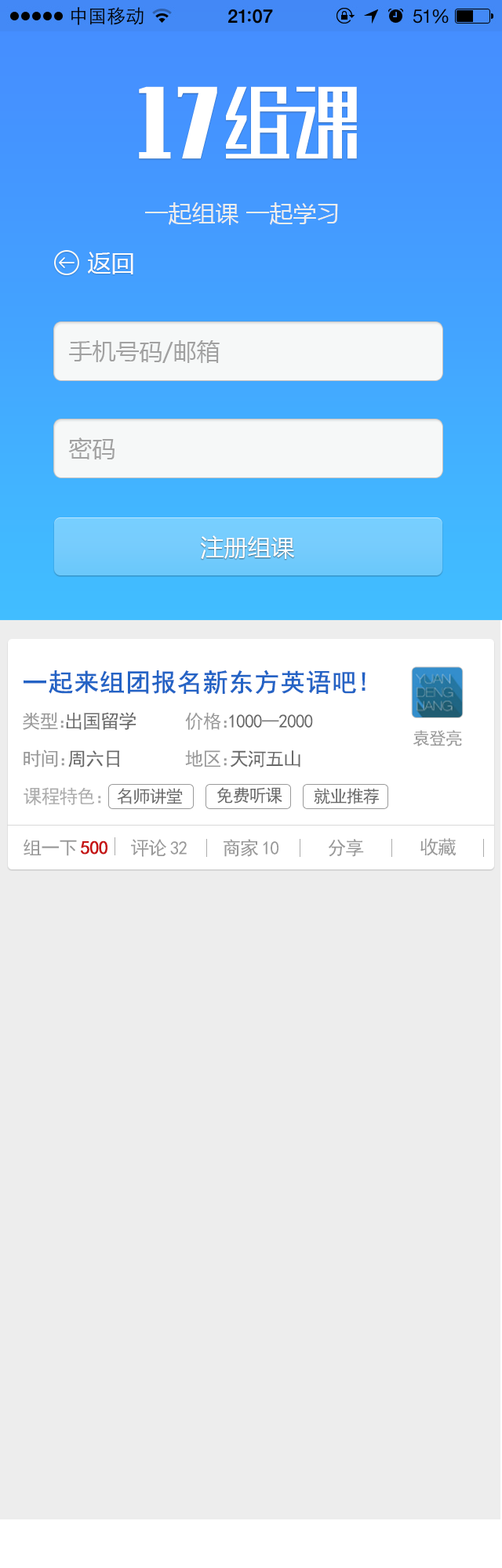
<style>
.page{position:relative;width:502px;height:1568px;background:#ededed}
.page>*{position:absolute;margin:0}
.t1{font:23.5px "MicrosoftYaHei";color:#ededed}
.t2{font:23.5px "MicrosoftYaHei";color:#fefefe}
.t3{font:23.5px "MicrosoftYaHei";color:#a1a1a1}
.t4{font:23.5px "MicrosoftYaHei"}
.t5{font:25.1px "SimHei";color:#2463c5;font-weight:bold}
.t6{font:18.8px "SimHei";letter-spacing:-0.05em;color:#696969}
.t7{font:18.8px "SimHei";letter-spacing:-0.05em;color:#999999}
.t8{font:18.8px "SimHei";letter-spacing:-0.62em;color:#999999}
.t9{font:17.2px "SimHei";letter-spacing:-0.05em;color:#999999}
.t10{font:18.8px "SimHei";letter-spacing:-0.5em;color:#999999}
.t11{font:18.8px "SimHei";letter-spacing:-0.52em;color:#999999}
.t12{font:18.8px "SimHei";letter-spacing:-0.05em;color:#acacac}
.t13{font:18.8px "SimHei";color:#acacac}
.t14{font:17.2px "SimHei";letter-spacing:-0.05em;color:#696969}
.t15{font:18.8px "SimHei";letter-spacing:-0.05em;color:#c61414;font-weight:bold}
.t16{font:18.8px "SimHei";letter-spacing:0.15em;color:#999999}
</style>
<div class="page">
<p class="t1" style="left:145px;top:202px;width:193px;height:23px">一起组课 一起学习</p>
<p class="t2" style="left:88px;top:252px;width:45px;height:22px">返回</p>
<p class="t3" style="left:69px;top:340px;width:151px;height:23px">手机号码/邮箱</p>
<p class="t3" style="left:68px;top:437px;width:46px;height:22px">密码</p>
<p class="t2" style="left:201px;top:535px;width:93px;height:24px">注册组课</p>
<p class="t4" style="left:201px;top:535px;width:92px;height:24px">注册账户</p>
<p class="t5" style="left:24px;top:670px;width:341px;height:24px">一起来组团报名新东方英语吧!</p>
<p class="t6" style="left:23px;top:712px;width:113px;height:18px"><span class="t7">类型</span><span class="t8">：</span>出国留学</p>
<p class="t6" style="left:185px;top:712px;width:128px;height:18px"><span class="t7">价格</span><span class="t8">：</span>1000--2000</p>
<p class="t9" style="left:412px;top:730px;width:50px;height:16px">袁登亮</p>
<p class="t6" style="left:24px;top:750px;width:95px;height:18px"><span class="t7">时间</span><span class="t10">：</span>周六日</p>
<p class="t6" style="left:185px;top:750px;width:115px;height:18px"><span class="t7">地区</span><span class="t11">：</span>天河五山</p>
<p class="t12" style="left:24px;top:787px;width:77px;height:18px">课程特色<span class="t13">：</span></p>
<p class="t14" style="left:117px;top:788px;width:66px;height:16px">名师讲堂</p>
<p class="t14" style="left:216px;top:787px;width:66px;height:17px">免费听课</p>
<p class="t14" style="left:314px;top:788px;width:65px;height:16px">就业推荐</p>
<p class="t15" style="left:24px;top:839px;width:83px;height:17px"><span class="t7">组一</span><span class="t16">下</span>500</p>
<p class="t7" style="left:131px;top:839px;width:56px;height:18px">评<span class="t16">论</span>32</p>
<p class="t7" style="left:223px;top:839px;width:55px;height:18px">商<span class="t16">家</span>10</p>
<p class="t7" style="left:328px;top:839px;width:36px;height:18px">分享</p>
<p class="t7" style="left:420px;top:838px;width:36px;height:18px">收藏</p>
</div>
